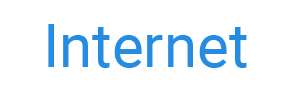
<style>
.page{position:relative;width:300px;height:100px;background:#ffffff}
.page>*{position:absolute;margin:0}
.t1{font:60px "Roboto-Regular";color:#258ce2}
</style>
<div class="page">
<p class="t1" style="left:48px;top:24px;width:199px;height:44px">Internet</p>
</div>
